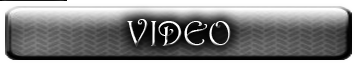
<style>
.page{position:relative;width:360px;height:67px}
.page>*{position:absolute;margin:0}
.t1{font:36px "Harrington"}
</style>
<div class="page">
<p class="t1" style="left:127px;top:19px;width:104px;height:28px">VIDEO</p>
</div>
